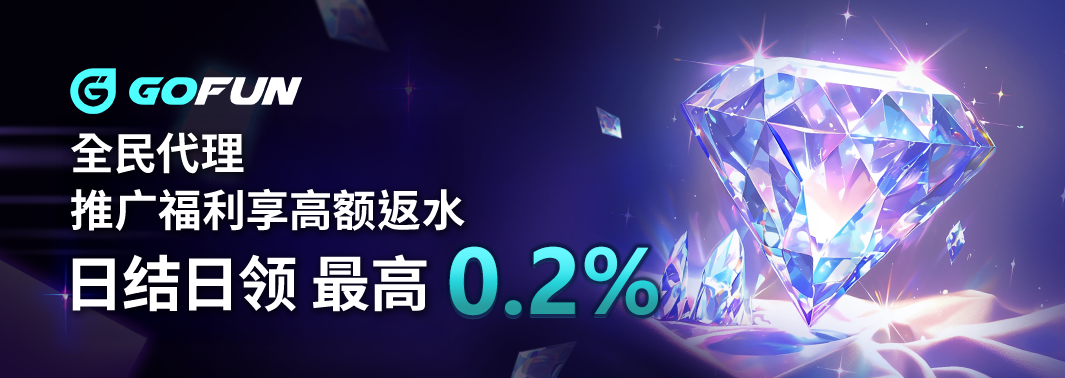
<style>
.page{position:relative;width:1065px;height:378px}
.page>*{position:absolute;margin:0}
.t1{font:44.1px "NotoSansCJKtc-Bold";letter-spacing:-0.01em;color:#ffffff}
.t2{font:60.4px "NotoSansCJKtc-Bold";letter-spacing:-0.01em;color:#ffffff}
</style>
<div class="page">
<p class="t1" style="left:71px;top:132px;width:173px;height:42px">全民代理</p>
<p class="t1" style="left:70px;top:188px;width:395px;height:43px">推广福利享高额返水</p>
<p class="t2" style="left:72px;top:254px;width:355px;height:58px">日结日领 最高</p>
</div>
